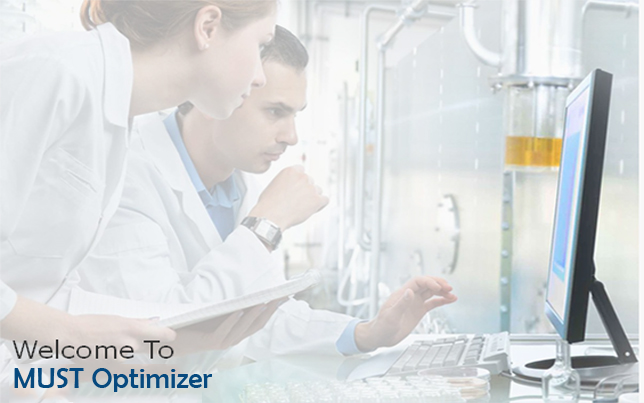
<style>
.page{position:relative;width:644px;height:403px}
.page>*{position:absolute;margin:0}
.t1{font:29.2px "BerlinSansFB-Reg";color:#06497e}
</style>
<div class="page">
<p class="t1" style="left:14px;top:368px;width:198px;height:24px">MUST Optimizer</p>
</div>
